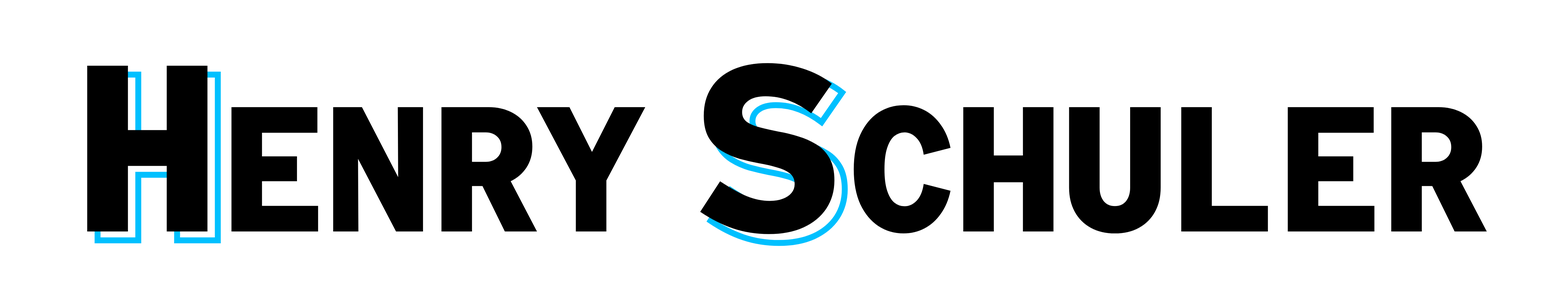
<style>
.page{position:relative;width:1568px;height:296px;background:#ffffff}
.page>*{position:absolute;margin:0}
.t1{font:177.5px "RedHatMono-Bold";color:#000000}
.t2{font:236.7px "RedHatMono-Bold";color:#000000}
.t3{font:236.7px "RedHatMono-Bold";letter-spacing:0.038em;color:#000000}
</style>
<div class="page">
<p class="t1" style="left:87px;top:63px;width:1400px;height:171px"><span class="t2">H</span>ENRY <span class="t3">S</span>CHULER</p>
</div>
